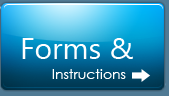
<style>
.page{position:relative;width:169px;height:96px}
.page>*{position:absolute;margin:0}
.t1{font:14px/20px "CenturyGothic";color:#ffffff}
.t2{font:30px/20px "MicrosoftNewTaiLue";color:#ffffff}
</style>
<div class="page">
<p class="t1" style="left:22px;top:38px;width:111px;height:41px"><span class="t2">Forms &amp;<br>        </span>Instructions</p>
</div>
